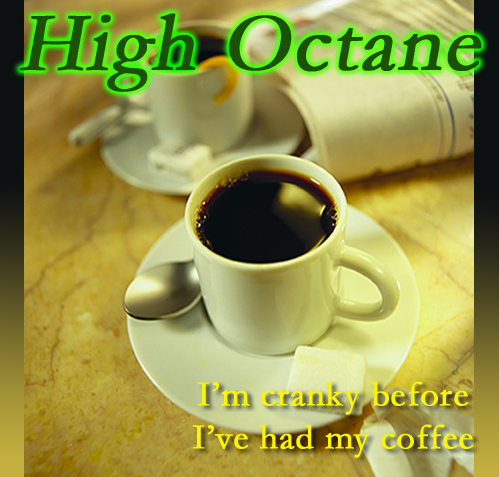
<style>
.page{position:relative;width:499px;height:477px}
.page>*{position:absolute;margin:0}
.t1{font:85px "Garamond";letter-spacing:0.01em;color:#1b5007;font-weight:bold;font-style:italic}
.t2{font:36px "Garamond";letter-spacing:0.01em;color:#f9f40c;font-weight:bold}
</style>
<div class="page">
<p class="t1" style="left:19px;top:13px;width:463px;height:79px">High Octane</p>
<p class="t2" style="left:192px;top:381px;width:281px;height:77px;text-align:center">I’m cranky before<br>I’ve had my coffee</p>
</div>
